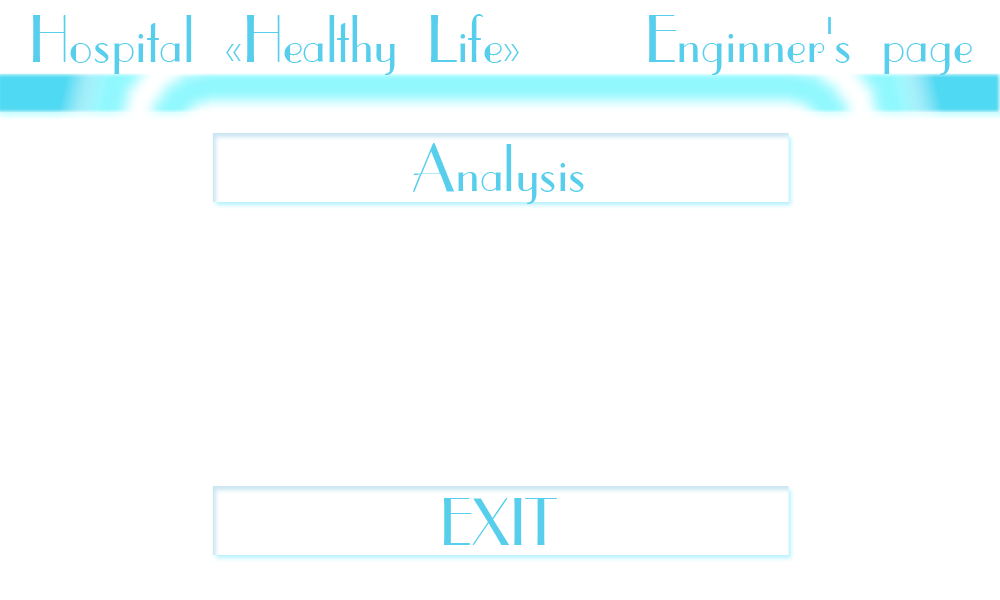
<style>
.page{position:relative;width:1000px;height:600px;background:#ffffff}
.page>*{position:absolute;margin:0}
.t1{font:63.5px "CafeParisC";color:#56ceec}
</style>
<div class="page">
<p class="t1" style="left:33px;top:14px;width:486px;height:61px">Hospital «Healthy Life»</p>
<p class="t1" style="left:649px;top:15px;width:323px;height:60px">Enginner's page</p>
<p class="t1" style="left:413px;top:143px;width:171px;height:61px">Analysis</p>
<p class="t1" style="left:444px;top:498px;width:113px;height:47px">EXIT</p>
</div>
